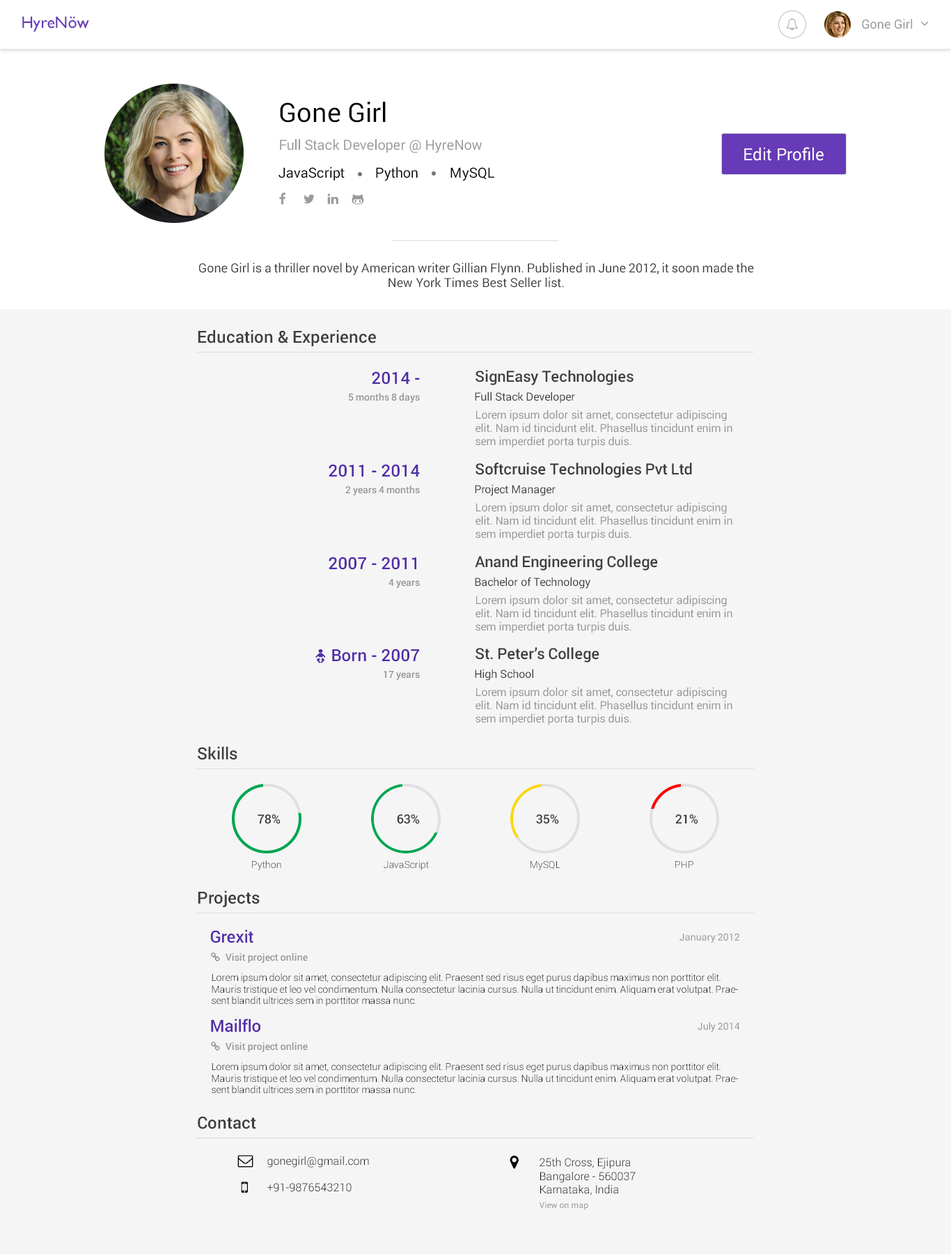
<style>
.page{position:relative;width:951px;height:1254px;background:#f5f5f5}
.page>*{position:absolute;margin:0}
.t1{font:16.7px "GillSans";color:#673ab7}
.t2{font:12.5px "Roboto-Regular";color:#9a9a9a}
.t3{font:26.5px "Roboto-Regular";color:#000000}
.t4{font:13.9px "Roboto-Regular";color:#9a9a9a}
.t5{font:16.7px "Roboto-Regular";color:#ffffff}
.t6{font:13.9px "Roboto-Regular";color:#000000}
.t7{font:12.5px "Roboto-Regular";color:#404040}
.t8{font:16.7px "Roboto-Medium";color:#3d3d3d}
.t9{font:16.7px "Roboto-Medium";color:#512da8}
.t10{font:15.3px "Roboto-Medium";color:#3d3d3d}
.t11{font:9.7px "Roboto-Medium";color:#949494}
.t12{font:11.1px "Roboto-Regular";color:#3d3d3d}
.t13{font:11.1px "Roboto-Regular";color:#949494}
.t14{font:12.5px "Roboto-Medium";color:#3d3d3d}
.t15{font:9.7px "Roboto-Light";color:#3d3d3d}
.t16{font:9.7px "Roboto-Light"}
.t17{font:9.7px "Roboto-Regular";color:#949494}
.t18{font:9.7px "Roboto-Light";color:#000000}
.t19{font:11.1px "Roboto-Light";color:#000000}
.t20{font:8.4px "Roboto-Regular";color:#949494}
</style>
<div class="page">
<p class="t1" style="left:22px;top:16px;width:67px;height:16px">HyreNöw</p>
<p class="t2" style="left:862px;top:19px;width:51px;height:10px">Gone Girl</p>
<p class="t3" style="left:280px;top:102px;width:106px;height:21px">Gone Girl</p>
<p class="t4" style="left:280px;top:139px;width:202px;height:14px">Full Stack Developer @ HyreNow</p>
<p class="t5" style="left:744px;top:147px;width:80px;height:14px">Edit Profile</p>
<p class="t6" style="left:279px;top:166px;width:66px;height:14px">JavaScript</p>
<p class="t6" style="left:376px;top:166px;width:42px;height:15px">Python</p>
<p class="t6" style="left:451px;top:167px;width:43px;height:14px">MySQL</p>
<p class="t7" style="left:199px;top:263px;width:555px;height:25px;text-align:justify">Gone Girl is a thriller novel by American writer Gillian Flynn. Published in June 2012, it soon made the New York Times Best Seller list.</p>
<p class="t8" style="left:198px;top:329px;width:178px;height:17px">Education &amp; Experience</p>
<p class="t9" style="left:372px;top:371px;width:48px;height:13px">2014 -</p>
<p class="t10" style="left:476px;top:370px;width:158px;height:15px">SignEasy Technologies</p>
<p class="t11" style="left:349px;top:393px;width:71px;height:10px">5 months 8 days</p>
<p class="t12" style="left:475px;top:391px;width:100px;height:12px">Full Stack Developer</p>
<p class="t13" style="left:476px;top:409px;width:257px;height:39px">Lorem ipsum dolor sit amet, consectetur adipiscing elit. Nam id tincidunt elit. Phasellus tincidunt enim in sem imperdiet porta turpis duis.</p>
<p class="t9" style="left:329px;top:464px;width:91px;height:13px">2011 - 2014</p>
<p class="t10" style="left:476px;top:462px;width:216px;height:16px">Softcruise Technologies Pvt Ltd</p>
<p class="t11" style="left:345px;top:485px;width:75px;height:10px">2 years 4 months</p>
<p class="t12" style="left:475px;top:484px;width:81px;height:12px">Project Manager</p>
<p class="t13" style="left:476px;top:502px;width:257px;height:38px">Lorem ipsum dolor sit amet, consectetur adipiscing elit. Nam id tincidunt elit. Phasellus tincidunt enim in sem imperdiet porta turpis duis.</p>
<p class="t9" style="left:329px;top:556px;width:87px;height:14px">2007 - 2011</p>
<p class="t10" style="left:475px;top:555px;width:183px;height:15px">Anand Engineering College</p>
<p class="t11" style="left:389px;top:579px;width:31px;height:9px">4 years</p>
<p class="t12" style="left:475px;top:577px;width:116px;height:11px">Bachelor of Technology</p>
<p class="t13" style="left:476px;top:595px;width:257px;height:38px">Lorem ipsum dolor sit amet, consectetur adipiscing elit. Nam id tincidunt elit. Phasellus tincidunt enim in sem imperdiet porta turpis duis.</p>
<p class="t9" style="left:332px;top:648px;width:87px;height:14px">Born - 2007</p>
<p class="t10" style="left:476px;top:647px;width:124px;height:15px">St. Peter’s College</p>
<p class="t11" style="left:384px;top:671px;width:36px;height:9px">17 years</p>
<p class="t12" style="left:475px;top:669px;width:58px;height:11px">High School</p>
<p class="t13" style="left:476px;top:687px;width:257px;height:38px">Lorem ipsum dolor sit amet, consectetur adipiscing elit. Nam id tincidunt elit. Phasellus tincidunt enim in sem imperdiet porta turpis duis.</p>
<p class="t8" style="left:198px;top:746px;width:39px;height:14px">Skills</p>
<p class="t14" style="left:258px;top:814px;width:23px;height:10px">78%</p>
<p class="t14" style="left:397px;top:814px;width:23px;height:10px">63%</p>
<p class="t14" style="left:536px;top:814px;width:23px;height:10px">35%</p>
<p class="t14" style="left:676px;top:814px;width:22px;height:10px">21%</p>
<p class="t15" style="left:252px;top:860px;width:29px;height:10px">Python</p>
<p class="t16" style="left:384px;top:860px;width:45px;height:10px">JavaScript</p>
<p class="t15" style="left:531px;top:861px;width:30px;height:9px">MySQL</p>
<p class="t16" style="left:676px;top:861px;width:18px;height:7px">PHP</p>
<p class="t8" style="left:198px;top:890px;width:62px;height:17px">Projects</p>
<p class="t9" style="left:210px;top:929px;width:43px;height:14px">Grexit</p>
<p class="t17" style="left:680px;top:933px;width:60px;height:9px">January 2012</p>
<p class="t18" style="left:212px;top:973px;width:526px;height:33px">Lorem ipsum dolor sit amet, consectetur adipiscing elit. Praesent sed risus eget purus dapibus maximus non porttitor elit. Mauris tristique et leo vel condimentum. Nulla consectetur lacinia cursus. Nulla ut tincidunt enim. Aliquam erat volutpat. Praesent blandit ultrices sem in porttitor massa nunc.</p>
<p class="t9" style="left:211px;top:1018px;width:49px;height:14px">Mailflo</p>
<p class="t17" style="left:698px;top:1022px;width:42px;height:9px">July 2014</p>
<p class="t18" style="left:212px;top:1062px;width:526px;height:33px">Lorem ipsum dolor sit amet, consectetur adipiscing elit. Praesent sed risus eget purus dapibus maximus non porttitor elit. Mauris tristique et leo vel condimentum. Nulla consectetur lacinia cursus. Nulla ut tincidunt enim. Aliquam erat volutpat. Praesent blandit ultrices sem in porttitor massa nunc.</p>
<p class="t8" style="left:198px;top:1116px;width:58px;height:13px">Contact</p>
<p class="t19" style="left:267px;top:1155px;width:102px;height:12px">gonegirl@gmail.com</p>
<p class="t19" style="left:540px;top:1157px;width:96px;height:37px">25th Cross, Ejipura<br>Bangalore - 560037<br>Karnataka, India</p>
<p class="t19" style="left:267px;top:1182px;width:85px;height:10px">+91-9876543210</p>
<p class="t20" style="left:539px;top:1201px;width:49px;height:9px">View on map</p>
</div>
